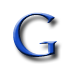
<style>
.page{position:relative;width:70px;height:70px;background:#ffffff}
.page>*{position:absolute;margin:0}
.t1{font:60px "CatullBQ-Regular";letter-spacing:-0.05em}
</style>
<div class="page">
<p class="t1" style="left:13px;top:12px;width:44px;height:45px">G</p>
</div>
